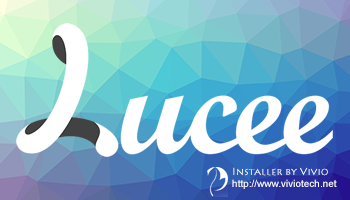
<style>
.page{position:relative;width:350px;height:200px}
.page>*{position:absolute;margin:0}
.t1{font:10px "LithosPro-Regular";color:#ffffff}
.t2{font:10px "ArialMT";color:#ffffff}
</style>
<div class="page">
<p class="t1" style="left:233px;top:167px;width:95px;height:9px">Installer by Vivio</p>
<p class="t2" style="left:232px;top:179px;width:105px;height:10px">http://www.viviotech.net</p>
</div>
